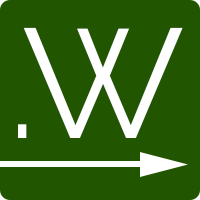
<style>
.page{position:relative;width:200px;height:200px;background:#225500}
.page>*{position:absolute;margin:0}
.t1{font:155.1px "Raleway-Regular";color:#ffffff}
.t2{font:138.9px "Raleway-Regular";color:#ffffff}
</style>
<div class="page">
<p class="t1" style="left:23px;top:27px;width:160px;height:111px">W</p>
<p class="t2" style="left:18px;top:124px;width:9px;height:14px">.</p>
</div>
